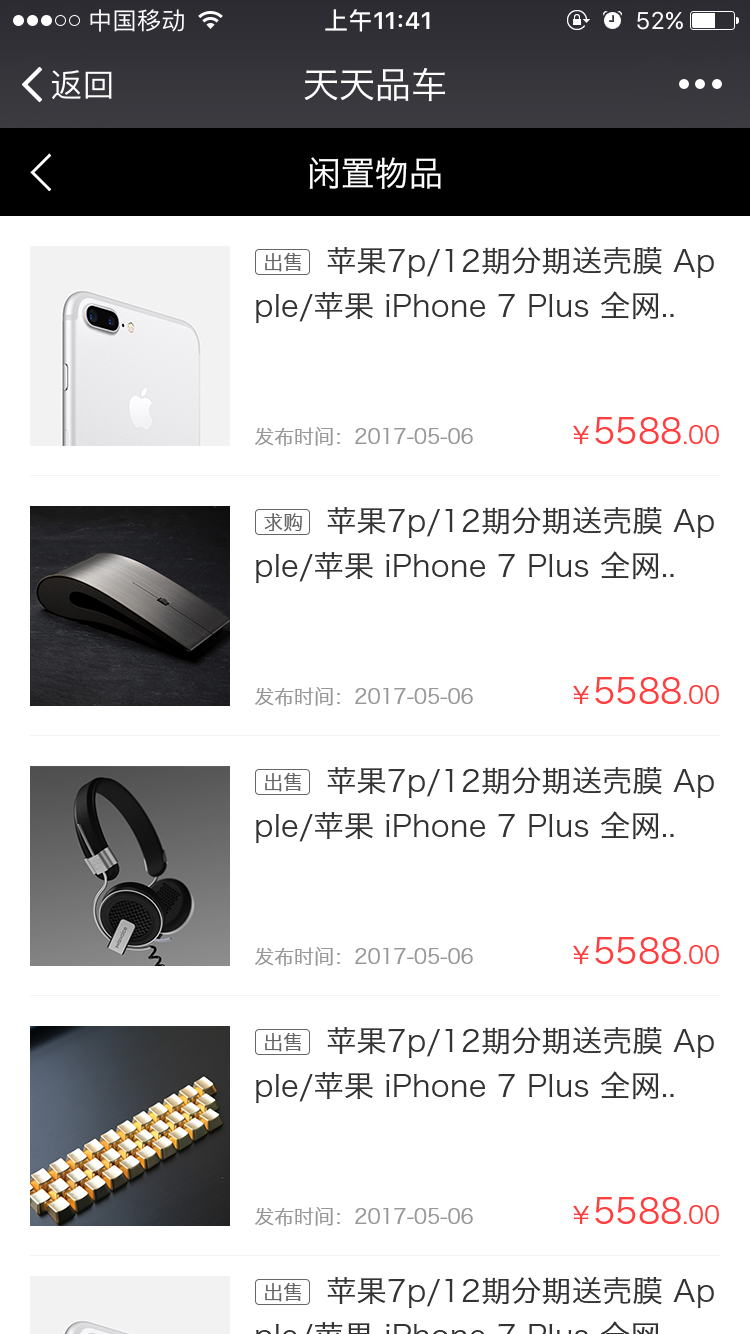
<style>
.page{position:relative;width:750px;height:1334px;background:#ffffff}
.page>*{position:absolute;margin:0}
.t1{font:36px "HiraginoSansGB-W3";color:#ffffff}
.t2{font:34px "HiraginoSansGB-W3";color:#ffffff}
.t3{font:30px/45px "HiraginoSansGB-W3";letter-spacing:0.01em;color:#333333}
.t4{font:20px "HiraginoSansGB-W3";color:#666666}
.t5{font:34px "HiraginoSansGB-W3";color:#ff3f3f}
.t6{font:24px "HiraginoSansGB-W3";color:#ff3f3f}
.t7{font:20px "HiraginoSansGB-W3";color:#989898}
</style>
<div class="page">
<p class="t1" style="left:304px;top:68px;width:141px;height:34px">天天品车</p>
<p class="t2" style="left:309px;top:157px;width:132px;height:32px">闲置物品</p>
<p class="t3" style="left:256px;top:246px;width:458px;height:77px">苹果7p/12期分期送壳膜 Ap<br>ple/苹果 iPhone 7 Plus 全网..</p>
<p class="t4" style="left:265px;top:252px;width:36px;height:20px">出售</p>
<p class="t5" style="left:573px;top:416px;width:146px;height:28px"><span class="t6">￥</span>5588<span class="t6">.00</span></p>
<p class="t7" style="left:254px;top:427px;width:219px;height:19px">发布时间：2017-05-06</p>
<p class="t3" style="left:256px;top:506px;width:458px;height:77px">苹果7p/12期分期送壳膜 Ap<br>ple/苹果 iPhone 7 Plus 全网..</p>
<p class="t4" style="left:264px;top:513px;width:38px;height:19px">求购</p>
<p class="t5" style="left:573px;top:676px;width:146px;height:28px"><span class="t6">￥</span>5588<span class="t6">.00</span></p>
<p class="t7" style="left:254px;top:687px;width:219px;height:19px">发布时间：2017-05-06</p>
<p class="t3" style="left:256px;top:766px;width:458px;height:77px">苹果7p/12期分期送壳膜 Ap<br>ple/苹果 iPhone 7 Plus 全网..</p>
<p class="t4" style="left:265px;top:772px;width:36px;height:20px">出售</p>
<p class="t5" style="left:573px;top:936px;width:146px;height:28px"><span class="t6">￥</span>5588<span class="t6">.00</span></p>
<p class="t7" style="left:254px;top:947px;width:219px;height:19px">发布时间：2017-05-06</p>
<p class="t3" style="left:256px;top:1026px;width:458px;height:77px">苹果7p/12期分期送壳膜 Ap<br>ple/苹果 iPhone 7 Plus 全网..</p>
<p class="t4" style="left:265px;top:1032px;width:36px;height:20px">出售</p>
<p class="t5" style="left:573px;top:1196px;width:146px;height:28px"><span class="t6">￥</span>5588<span class="t6">.00</span></p>
<p class="t7" style="left:254px;top:1207px;width:219px;height:19px">发布时间：2017-05-06</p>
<p class="t4" style="left:265px;top:1282px;width:36px;height:20px">出售</p>
</div>
